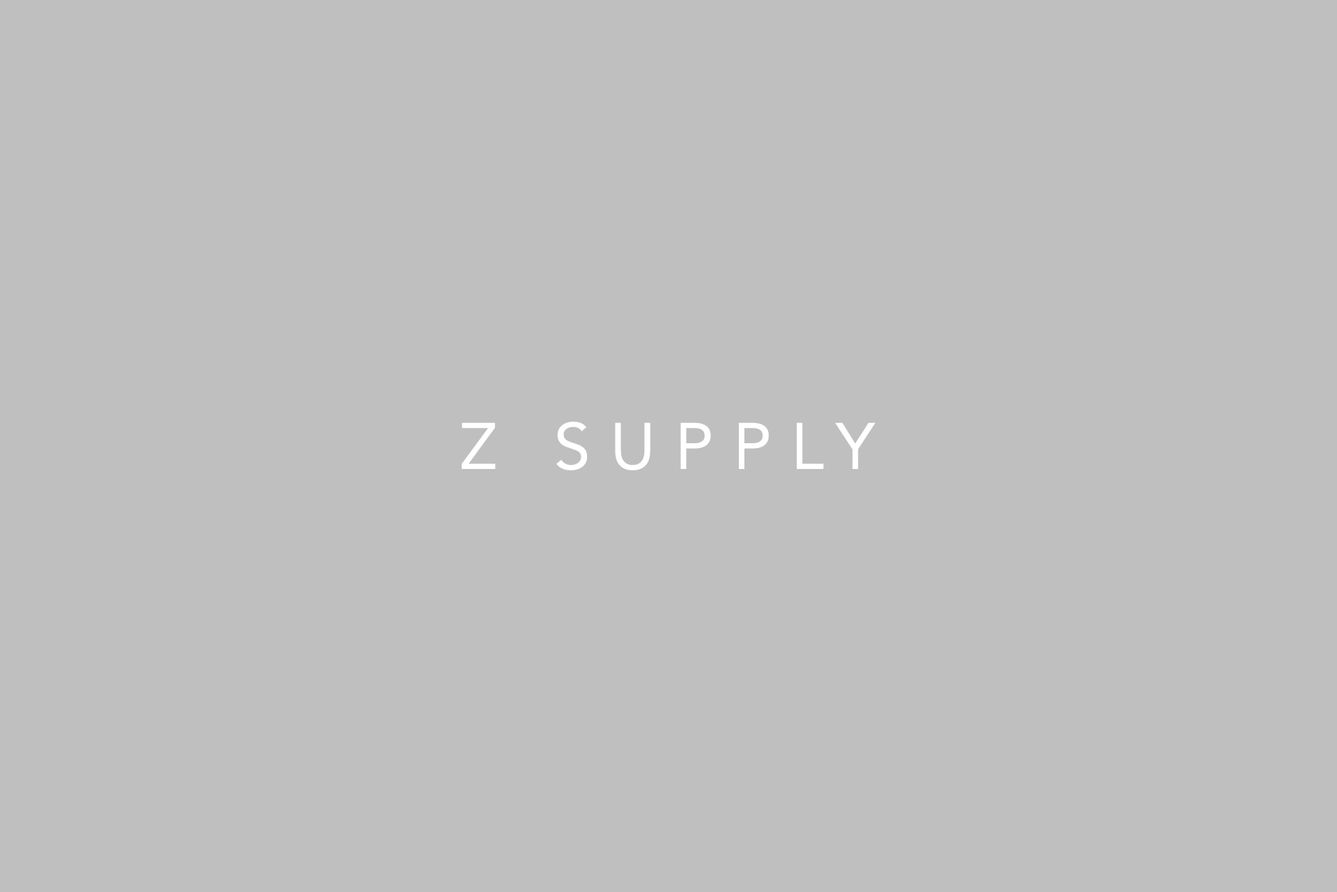
<style>
.page{position:relative;width:1337px;height:892px;background:#bfbfbf}
.page>*{position:absolute;margin:0}
.t1{font:65px "Avenir-Roman";letter-spacing:0.3em;color:#ffffff;text-transform:uppercase}
</style>
<div class="page">
<p class="t1" style="left:462px;top:421px;width:414px;height:49px">Z SUPPLY</p>
</div>
